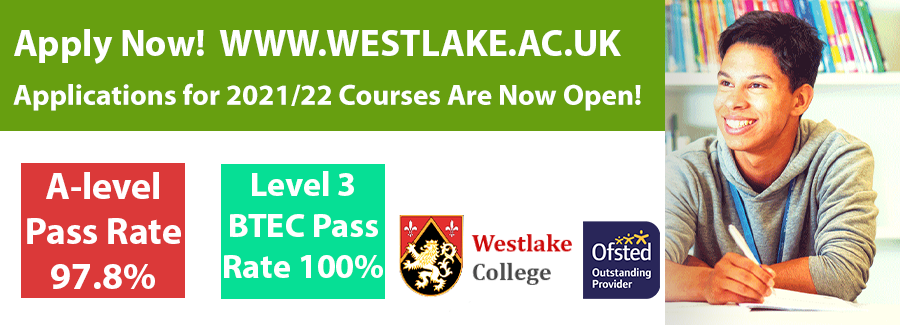
<style>
.page{position:relative;width:900px;height:325px;background:#ffffff}
.page>*{position:absolute;margin:0}
.t1{font:37.5px "MyriadPro-Bold";color:#ffffff}
.t2{font:29.2px "MyriadPro-Bold";color:#ffffff}
.t3{font:37.6px "MyriadPro-Bold";color:#ffffff}
.t4{font:34.2px "MyriadPro-Bold";color:#ffffff}
</style>
<div class="page">
<p class="t1" style="left:14px;top:29px;width:607px;height:35px">Apply Now!  WWW.WESTLAKE.AC.UK</p>
<p class="t2" style="left:13px;top:83px;width:628px;height:28px">Applications for 2021/22 Courses Are Now Open!</p>
<p class="t3" style="left:27px;top:172px;width:154px;height:117px;text-align:center">A-level <br>Pass Rate<br>97.8%</p>
<p class="t4" style="left:224px;top:171px;width:159px;height:107px;text-align:center">Level 3 BTEC Pass Rate 100%</p>
</div>
